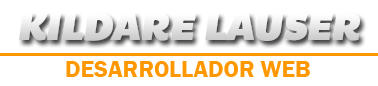
<style>
.page{position:relative;width:378px;height:86px;background:#ffffff}
.page>*{position:absolute;margin:0}
.t1{font:40px "BemioItalic";color:#e4e4e4}
.t2{font:24px "FranklinGothic-Demi";color:#ff9800}
</style>
<div class="page">
<p class="t1" style="left:19px;top:12px;width:341px;height:29px">KILDARE LAUSER</p>
<p class="t2" style="left:66px;top:61px;width:244px;height:16px">DESARROLLADOR WEB</p>
</div>
